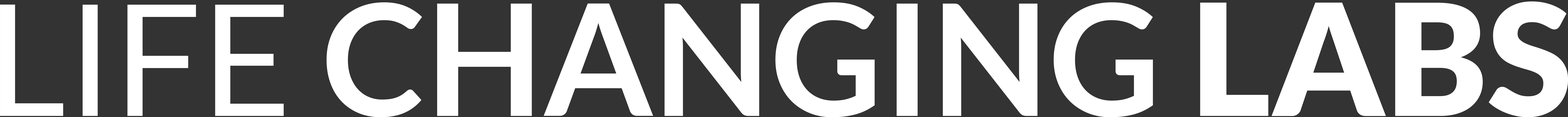
<style>
.page{position:relative;width:1568px;height:117px;background:#333333}
.page>*{position:absolute;margin:0}
.t1{font:155.2px "Lato-Bold";color:#ffffff}
.t2{font:155.2px "Lato-Regular";color:#ffffff}
.t3{font:155.2px "Lato-Black";color:#ffffff}
</style>
<div class="page">
<p class="t1" style="left:0px;top:1px;width:1568px;height:116px"><span class="t2">LIFE </span>CHANGING <span class="t3">LABS</span></p>
</div>
